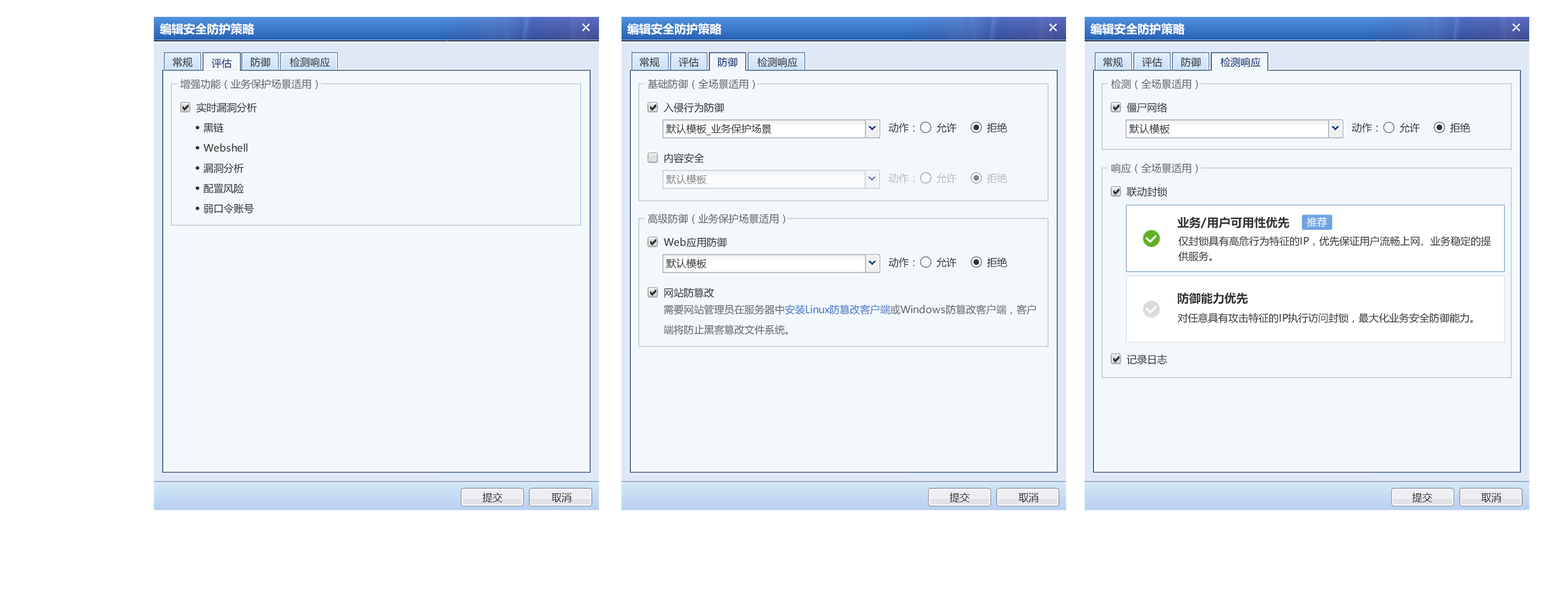
<style>
.page{position:relative;width:1568px;height:592px;background:#f3f8fc}
.page>*{position:absolute;margin:0}
.t1{font:11.8px "MicrosoftYaHei-Bold";color:#ffffff}
.t2{font:10.1px "MicrosoftYaHei";color:#333333}
.t3{font:10.1px "MicrosoftYaHei";color:#0f2c72}
.t4{font:10.1px "MicrosoftYaHei";color:#666666}
.t5{font:10.1px/20.2px "MicrosoftYaHei";color:#333333}
.t6{font:11.8px/20.2px "MicrosoftYaHei-Bold";color:#333333;font-weight:bold}
.t7{font:10.1px "MicrosoftYaHei";color:#b9bdc0}
.t8{font:10.1px "MicrosoftYaHei";color:#808283}
.t9{font:11.8px "MicrosoftYaHei-Bold";color:#333333}
.t10{font:10.1px "MicrosoftYaHei";color:#f3f8fc}
.t11{font:10.1px/15.2px "MicrosoftYaHei";color:#333333}
.t12{font:10.1px/20.2px "MicrosoftYaHei";color:#666666}
.t13{font:10.1px/20.2px "MicrosoftYaHei";color:#4677c6}
</style>
<div class="page">
<p class="t1" style="left:160px;top:23px;width:94px;height:12px">编辑安全防护策略</p>
<p class="t1" style="left:627px;top:23px;width:94px;height:12px">编辑安全防护策略</p>
<p class="t1" style="left:1090px;top:23px;width:95px;height:12px">编辑安全防护策略</p>
<p class="t2" style="left:172px;top:57px;width:21px;height:10px">常规</p>
<p class="t3" style="left:211px;top:58px;width:21px;height:10px">评估</p>
<p class="t2" style="left:250px;top:57px;width:21px;height:10px">防御</p>
<p class="t2" style="left:290px;top:57px;width:40px;height:10px">检测响应</p>
<p class="t2" style="left:639px;top:57px;width:21px;height:10px">常规</p>
<p class="t2" style="left:678px;top:57px;width:21px;height:10px">评估</p>
<p class="t3" style="left:717px;top:57px;width:21px;height:10px">防御</p>
<p class="t2" style="left:757px;top:57px;width:41px;height:10px">检测响应</p>
<p class="t2" style="left:1103px;top:57px;width:20px;height:10px">常规</p>
<p class="t2" style="left:1142px;top:57px;width:21px;height:10px">评估</p>
<p class="t2" style="left:1181px;top:57px;width:20px;height:10px">防御</p>
<p class="t3" style="left:1220px;top:57px;width:41px;height:10px">检测响应</p>
<p class="t4" style="left:180px;top:79px;width:138px;height:10px">增强功能（业务保护场景适用）</p>
<p class="t4" style="left:648px;top:79px;width:107px;height:11px">基础防御（全场景适用）</p>
<p class="t4" style="left:1111px;top:79px;width:87px;height:11px">检测（全场景适用）</p>
<p class="t2" style="left:196px;top:102px;width:61px;height:11px">实时漏洞分析</p>
<p class="t2" style="left:664px;top:102px;width:60px;height:11px">入侵行为防御</p>
<p class="t2" style="left:1127px;top:103px;width:40px;height:10px">僵尸网络</p>
<p class="t5" style="left:195px;top:123px;width:59px;height:91px"><span class="t6">· </span>黑链<br><span class="t6">· </span>Webshell<br><span class="t6">· </span>漏洞分析<br><span class="t6">· </span>配置风险<br><span class="t6">· </span>弱口令账号</p>
<p class="t2" style="left:666px;top:124px;width:105px;height:11px">默认模板_业务保护场景</p>
<p class="t2" style="left:889px;top:122px;width:26px;height:11px">动作：</p>
<p class="t2" style="left:936px;top:123px;width:21px;height:10px">允许</p>
<p class="t2" style="left:987px;top:123px;width:20px;height:10px">拒绝</p>
<p class="t2" style="left:1129px;top:124px;width:40px;height:10px">默认模板</p>
<p class="t2" style="left:1352px;top:122px;width:26px;height:11px">动作：</p>
<p class="t2" style="left:1400px;top:123px;width:20px;height:10px">允许</p>
<p class="t2" style="left:1450px;top:123px;width:20px;height:10px">拒绝</p>
<p class="t2" style="left:664px;top:153px;width:40px;height:10px">内容安全</p>
<p class="t7" style="left:889px;top:173px;width:26px;height:11px">动作：</p>
<p class="t7" style="left:936px;top:173px;width:21px;height:11px">允许</p>
<p class="t7" style="left:987px;top:173px;width:20px;height:11px">拒绝</p>
<p class="t4" style="left:1111px;top:163px;width:87px;height:11px">响应（全场景适用）</p>
<p class="t8" style="left:666px;top:175px;width:40px;height:9px">默认模板</p>
<p class="t2" style="left:1127px;top:186px;width:40px;height:11px">联动封锁</p>
<p class="t4" style="left:648px;top:213px;width:137px;height:12px">高级防御（业务保护场景适用）</p>
<p class="t9" style="left:1177px;top:217px;width:113px;height:11px">业务/用户可用性优先</p>
<p class="t10" style="left:1307px;top:217px;width:20px;height:10px">推荐</p>
<p class="t2" style="left:664px;top:237px;width:62px;height:11px">Web应用防御</p>
<p class="t11" style="left:1178px;top:236px;width:313px;height:26px">仅封锁具有高危行为特征的IP，优先保证用户流畅上网、业务稳定的提供服务。</p>
<p class="t2" style="left:889px;top:257px;width:26px;height:11px">动作：</p>
<p class="t2" style="left:936px;top:258px;width:21px;height:10px">允许</p>
<p class="t2" style="left:987px;top:258px;width:20px;height:10px">拒绝</p>
<p class="t2" style="left:666px;top:259px;width:40px;height:9px">默认模板</p>
<p class="t2" style="left:664px;top:287px;width:50px;height:11px">网站防篡改</p>
<p class="t9" style="left:1178px;top:292px;width:70px;height:12px">防御能力优先</p>
<p class="t12" style="left:664px;top:304px;width:372px;height:31px">需要网站管理员在服务器中<span class="t13">安装Linux防篡改客户端</span>或Windows防篡改客户端，客户<br>端将防止黑客篡改文件系统。</p>
<p class="t2" style="left:1178px;top:313px;width:295px;height:10px">对任意具有攻击特征的IP执行访问封锁，最大化业务安全防御能力。</p>
<p class="t2" style="left:1127px;top:355px;width:40px;height:10px">记录日志</p>
<p class="t2" style="left:482px;top:493px;width:20px;height:9px">提交</p>
<p class="t2" style="left:551px;top:493px;width:21px;height:9px">取消</p>
<p class="t2" style="left:949px;top:493px;width:21px;height:9px">提交</p>
<p class="t2" style="left:1018px;top:493px;width:21px;height:9px">取消</p>
<p class="t2" style="left:1412px;top:493px;width:20px;height:9px">提交</p>
<p class="t2" style="left:1481px;top:493px;width:20px;height:9px">取消</p>
</div>
